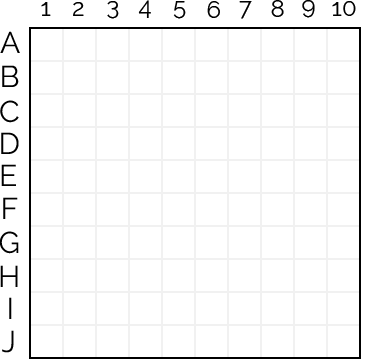
<style>
.page{position:relative;width:365px;height:363px;background:#ffffff}
.page>*{position:absolute;margin:0}
.t1{font:24px "Raleway-Regular";color:#000000}
.t2{font:30px "Raleway-Regular";color:#000000}
</style>
<div class="page">
<p class="t1" style="left:41px;top:2px;width:10px;height:14px">1</p>
<p class="t1" style="left:73px;top:2px;width:11px;height:14px">2</p>
<p class="t1" style="left:107px;top:1px;width:12px;height:18px">3</p>
<p class="t1" style="left:138px;top:0px;width:13px;height:18px">4</p>
<p class="t1" style="left:173px;top:1px;width:13px;height:18px">5</p>
<p class="t1" style="left:207px;top:1px;width:13px;height:17px">6</p>
<p class="t1" style="left:239px;top:1px;width:13px;height:18px">7</p>
<p class="t1" style="left:271px;top:0px;width:13px;height:17px">8</p>
<p class="t1" style="left:302px;top:0px;width:13px;height:18px">9</p>
<p class="t1" style="left:332px;top:1px;width:24px;height:15px">10</p>
<p class="t2" style="left:0px;top:31px;width:20px;height:22px">A</p>
<p class="t2" style="left:2px;top:65px;width:17px;height:22px">B</p>
<p class="t2" style="left:0px;top:100px;width:19px;height:23px">C</p>
<p class="t2" style="left:1px;top:132px;width:18px;height:22px">D</p>
<p class="t2" style="left:1px;top:164px;width:15px;height:22px">E</p>
<p class="t2" style="left:3px;top:197px;width:15px;height:22px">F</p>
<p class="t2" style="left:0px;top:231px;width:19px;height:23px">G</p>
<p class="t2" style="left:0px;top:265px;width:18px;height:22px">H</p>
<p class="t2" style="left:9px;top:297px;width:3px;height:22px">I</p>
<p class="t2" style="left:2px;top:330px;width:12px;height:23px">J</p>
</div>
